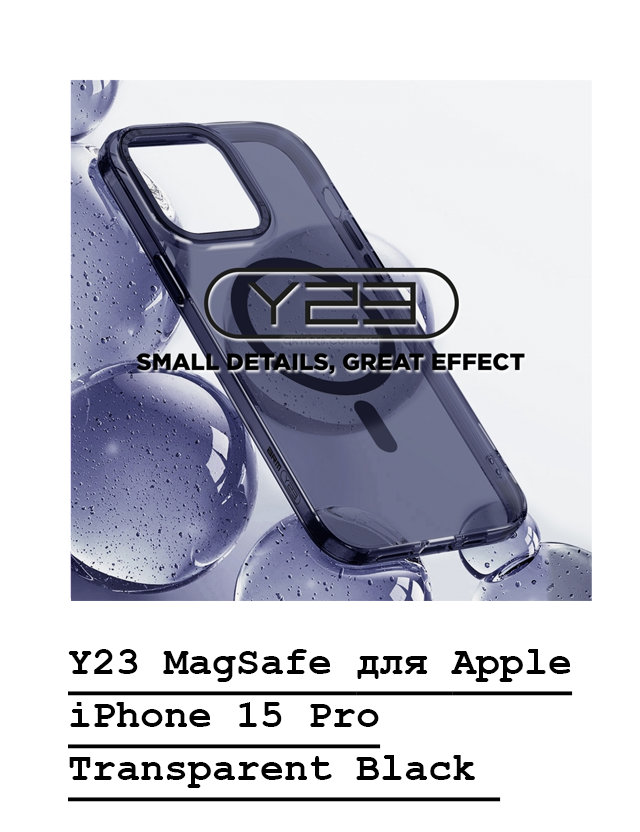
<style>
.page{position:relative;width:640px;height:832px;background:#ffffff}
.page>*{position:absolute;margin:0}
.t1{font:40px/53px "CourierNewPS-BoldMT";color:#010101;text-decoration:underline}
</style>
<div class="page">
<p class="t1" style="left:68px;top:649px;width:505px;height:153px">Y23 MagSafe для Apple<br>iPhone 15 Pro<br>Transparent Black</p>
</div>
